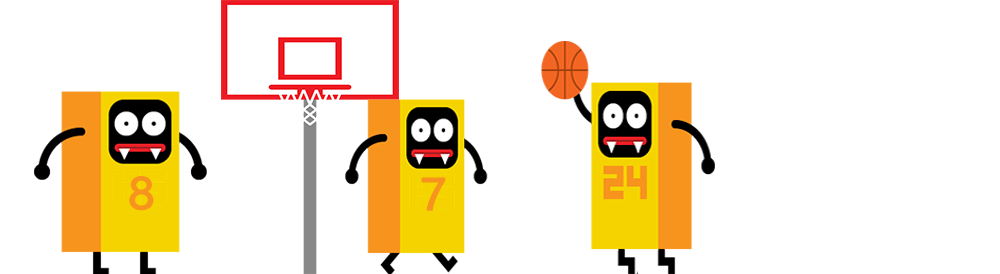
<style>
.page{position:relative;width:1000px;height:274px;background:#ffffff}
.page>*{position:absolute;margin:0}
.t1{font:42px "MicrosoftYaHeiUI";letter-spacing:0.1em;color:#f7941d;font-weight:bold;scale:1.1 1}
</style>
<div class="page">
<p class="t1" style="left:129px;top:176px;width:25px;height:35px">8</p>
<p class="t1" style="left:421px;top:177px;width:25px;height:34px">7</p>
</div>
